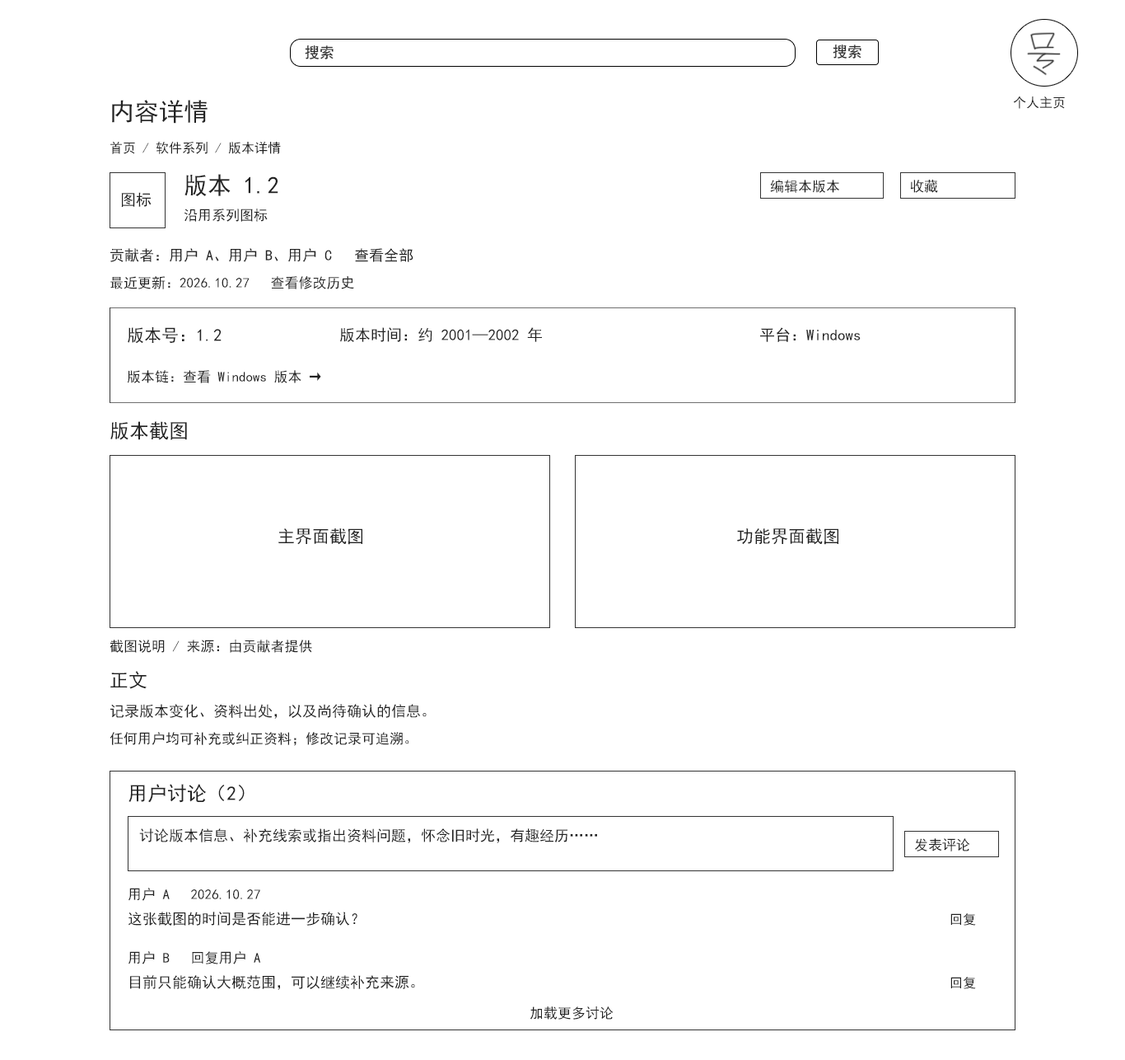
<style>
.page{position:relative;width:1125px;height:1060px;background:#ffffff}
.page>*{position:absolute;margin:0}
.t1{font:14.8px "SimHei";color:#282828}
.t2{font:24.7px "SimHei";color:#222222}
.t3{font:13.2px "SimHei";color:#222222}
.t4{font:23.9px "SimHei";color:#222222}
.t5{font:14px "SimHei";color:#222222}
.t6{font:15.7px "SimHei";color:#222222}
.t7{font:14.8px "SimHei";color:#222222}
.t8{font:17.3px "SimHei";color:#222222}
.t9{font:19.8px "SimHei";color:#222222}
.t10{font:18.9px "SimHei";color:#222222}
</style>
<div class="page">
<p class="t1" style="left:305px;top:45px;width:29px;height:14px">搜索</p>
<p class="t1" style="left:833px;top:44px;width:29px;height:14px">搜索</p>
<p class="t2" style="left:112px;top:100px;width:96px;height:24px">内容详情</p>
<p class="t3" style="left:1013px;top:96px;width:52px;height:13px">个人主页</p>
<p class="t3" style="left:110px;top:141px;width:171px;height:13px">首页 / 软件系列 / 版本详情</p>
<p class="t4" style="left:185px;top:174px;width:93px;height:22px">版本 1.2</p>
<p class="t5" style="left:770px;top:180px;width:70px;height:13px">编辑本版本</p>
<p class="t5" style="left:910px;top:180px;width:28px;height:13px">收藏</p>
<p class="t6" style="left:121px;top:192px;width:31px;height:15px">图标</p>
<p class="t5" style="left:185px;top:208px;width:83px;height:14px">沿用系列图标</p>
<p class="t7" style="left:110px;top:248px;width:304px;height:14px">贡献者：用户 A、用户 B、用户 C   查看全部</p>
<p class="t5" style="left:110px;top:276px;width:244px;height:13px">最近更新：2026.10.27   查看修改历史</p>
<p class="t8" style="left:128px;top:327px;width:94px;height:17px">版本号：1.2</p>
<p class="t6" style="left:340px;top:327px;width:202px;height:15px">版本时间：约 2001—2002 年</p>
<p class="t6" style="left:760px;top:327px;width:101px;height:15px">平台：Windows</p>
<p class="t5" style="left:128px;top:370px;width:193px;height:13px">版本链：查看 Windows 版本 →</p>
<p class="t9" style="left:110px;top:421px;width:77px;height:19px">版本截图</p>
<p class="t8" style="left:278px;top:528px;width:85px;height:17px">主界面截图</p>
<p class="t8" style="left:737px;top:528px;width:102px;height:17px">功能界面截图</p>
<p class="t5" style="left:110px;top:639px;width:202px;height:14px">截图说明 / 来源：由贡献者提供</p>
<p class="t10" style="left:110px;top:671px;width:37px;height:18px">正文</p>
<p class="t7" style="left:110px;top:704px;width:317px;height:14px">记录版本变化、资料出处，以及尚待确认的信息。</p>
<p class="t5" style="left:110px;top:732px;width:299px;height:14px">任何用户均可补充或纠正资料；修改记录可追溯。</p>
<p class="t9" style="left:129px;top:784px;width:116px;height:18px">用户讨论（2）</p>
<p class="t7" style="left:139px;top:828px;width:458px;height:15px">讨论版本信息、补充线索或指出资料问题，怀念旧时光，有趣经历……</p>
<p class="t5" style="left:915px;top:838px;width:56px;height:13px">发表评论</p>
<p class="t5" style="left:129px;top:887px;width:131px;height:14px">用户 A   2026.10.27</p>
<p class="t7" style="left:129px;top:911px;width:229px;height:14px">这张截图的时间是否能进一步确认？</p>
<p class="t3" style="left:951px;top:913px;width:25px;height:12px">回复</p>
<p class="t5" style="left:129px;top:951px;width:132px;height:13px">用户 B   回复用户 A</p>
<p class="t7" style="left:130px;top:975px;width:285px;height:14px">目前只能确认大概范围，可以继续补充来源。</p>
<p class="t3" style="left:951px;top:976px;width:25px;height:13px">回复</p>
<p class="t5" style="left:530px;top:1006px;width:84px;height:13px">加载更多讨论</p>
</div>
